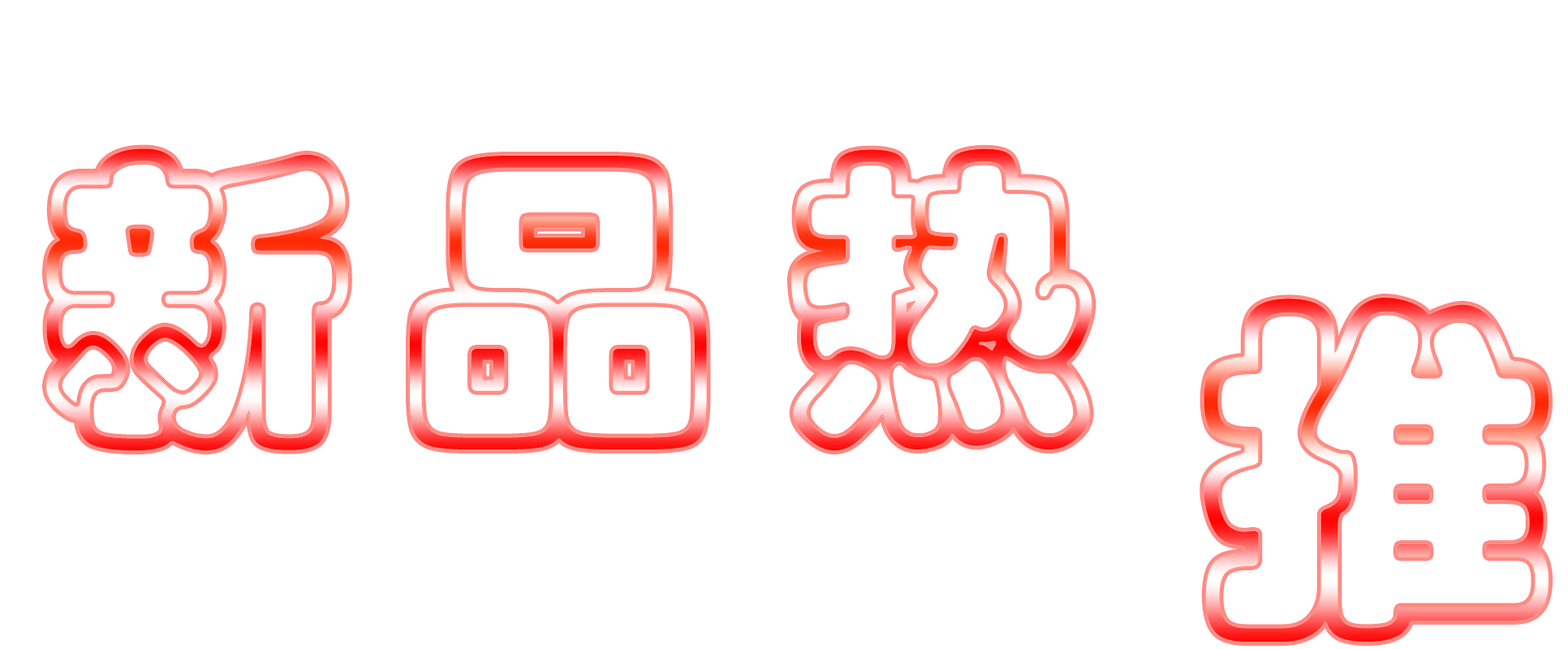
<style>
.page{position:relative;width:1568px;height:649px;background:#ffffff}
.page>*{position:absolute;margin:0}
.t1{font:315.1px "STCaiyun"}
.t2{font:359.8px "STCaiyun"}
</style>
<div class="page">
<p class="t1" style="left:46px;top:149px;width:302px;height:302px">新</p>
<p class="t1" style="left:791px;top:149px;width:301px;height:302px">热</p>
<p class="t1" style="left:410px;top:156px;width:297px;height:294px">品</p>
<p class="t2" style="left:1204px;top:298px;width:345px;height:344px">推</p>
</div>
